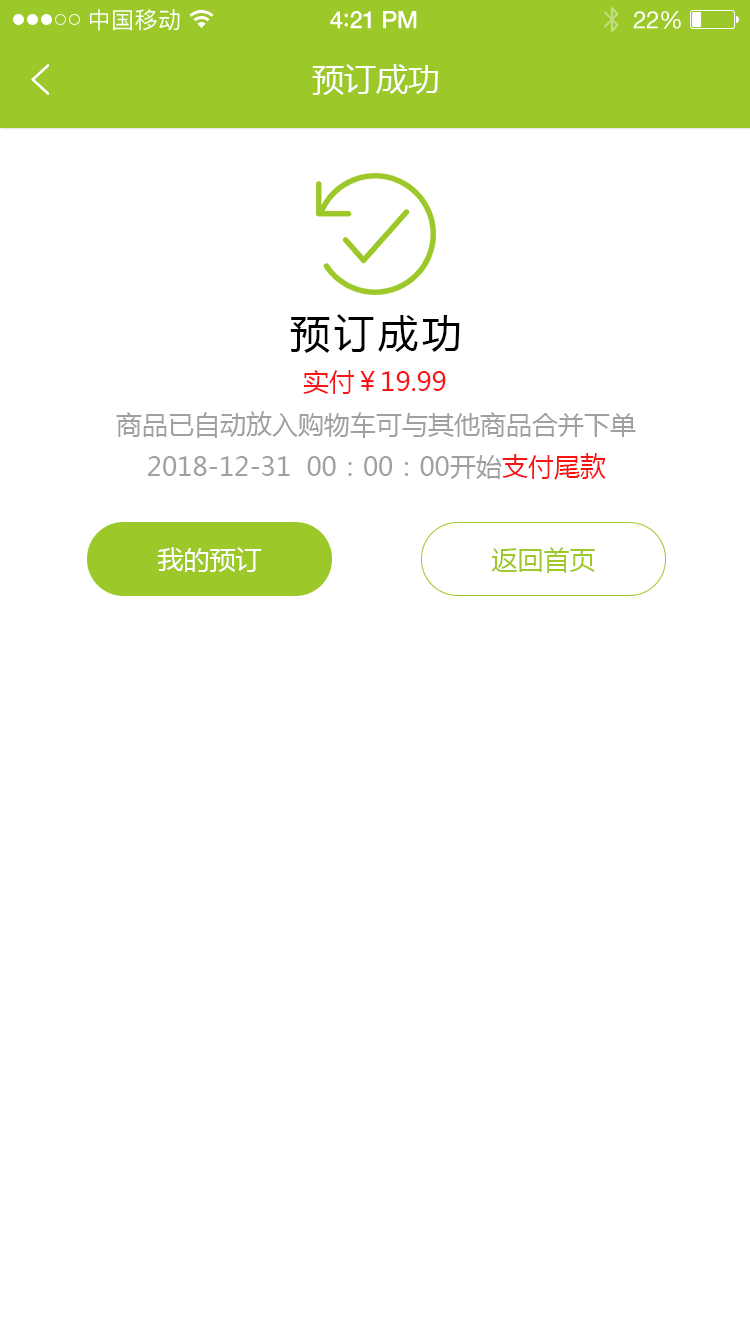
<style>
.page{position:relative;width:750px;height:1334px;background:#ffffff}
.page>*{position:absolute;margin:0}
.t1{font:23px "PingFangSC-Regular";letter-spacing:0.02em;color:#ffffff}
.t2{font:24px "HelveticaNeue-Medium";letter-spacing:-0.02em;color:#ffffff}
.t3{font:26px "Avenir-Medium";letter-spacing:-0.02em;color:#ffffff}
.t4{font:24px "HelveticaNeue";letter-spacing:-0.02em;color:#ffffff}
.t5{font:32px "MicrosoftYaHei";color:#ffffff;text-transform:uppercase}
.t6{font:40px "MicrosoftYaHei";letter-spacing:0.1em;color:#000000;text-transform:uppercase}
.t7{font:25.7px "MicrosoftYaHei";color:#f91515;text-transform:uppercase}
.t8{font:26px "MicrosoftYaHei";color:#a0a0a0;text-transform:uppercase}
.t9{font:26px "MicrosoftYaHei";color:#f91212;text-transform:uppercase}
.t10{font:26px "MicrosoftYaHei";color:#ffffff;text-transform:uppercase}
.t11{font:26px "MicrosoftYaHei";color:#9cc829;text-transform:uppercase}
</style>
<div class="page">
<p class="t1" style="left:90px;top:9px;width:90px;height:22px">中国移动</p>
<p class="t2" style="left:330px;top:11px;width:87px;height:18px">4<span class="t3">:</span>21 PM</p>
<p class="t4" style="left:633px;top:11px;width:48px;height:18px">22%</p>
<p class="t5" style="left:312px;top:64px;width:126px;height:31px">预订成功</p>
<p class="t6" style="left:290px;top:314px;width:170px;height:39px">预订成功</p>
<p class="t7" style="left:303px;top:370px;width:143px;height:24px">实付￥19.99</p>
<p class="t8" style="left:116px;top:411px;width:520px;height:27px">商品已自动放入购物车可与其他商品合并下单</p>
<p class="t8" style="left:147px;top:453px;width:459px;height:27px">2018-12-31  00：00：00开始<span class="t9">支付尾款</span></p>
<p class="t10" style="left:157px;top:547px;width:105px;height:25px">我的预订</p>
<p class="t11" style="left:492px;top:547px;width:103px;height:26px">返回首页</p>
</div>
